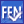
<style>
.page{position:relative;width:24px;height:24px}
.page>*{position:absolute;margin:0}
.t1{font:18px "EstrangeloEdessa";color:#ffffff;font-weight:bold;scale:0.67 1}
</style>
<div class="page">
<p class="t1" style="left:2px;top:6px;width:20px;height:13px">FEN</p>
</div>
